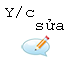
<style>
.page{position:relative;width:71px;height:58px;background:#ffffff}
.page>*{position:absolute;margin:0}
.t1{font:12px/13.3px "CourierNewPSMT";color:#000000}
</style>
<div class="page">
<p class="t1" style="left:5px;top:6px;width:59px;height:24px">Y/c<br>   sửa</p>
</div>
